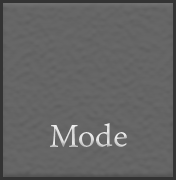
<style>
.page{position:relative;width:176px;height:180px}
.page>*{position:absolute;margin:0}
.t1{font:36px "AdobeDevanagari-Regular";color:#e6e6e6}
</style>
<div class="page">
<p class="t1" style="left:50px;top:123px;width:77px;height:24px">Mode</p>
</div>
